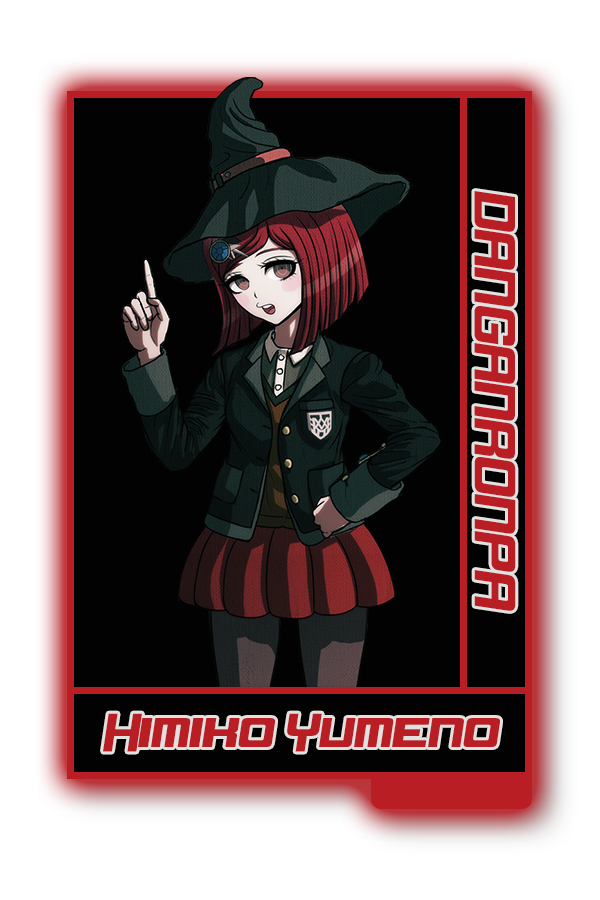
<style>
.page{position:relative;width:600px;height:900px;background:#020202}
.page>*{position:absolute;margin:0}
.t1{font:48.8px "DorBlue";color:#bb2c2e}
.t2{font:45.6px "DorBlue";color:#bb2c2e}
</style>
<div class="page">
<p class="t1" style="left:474px;top:191px;width:42px;height:420px;rotate:90deg">DANGANRONPA</p>
<p class="t2" style="left:103px;top:713px;width:397px;height:39px">Himiko Yumeno</p>
</div>
